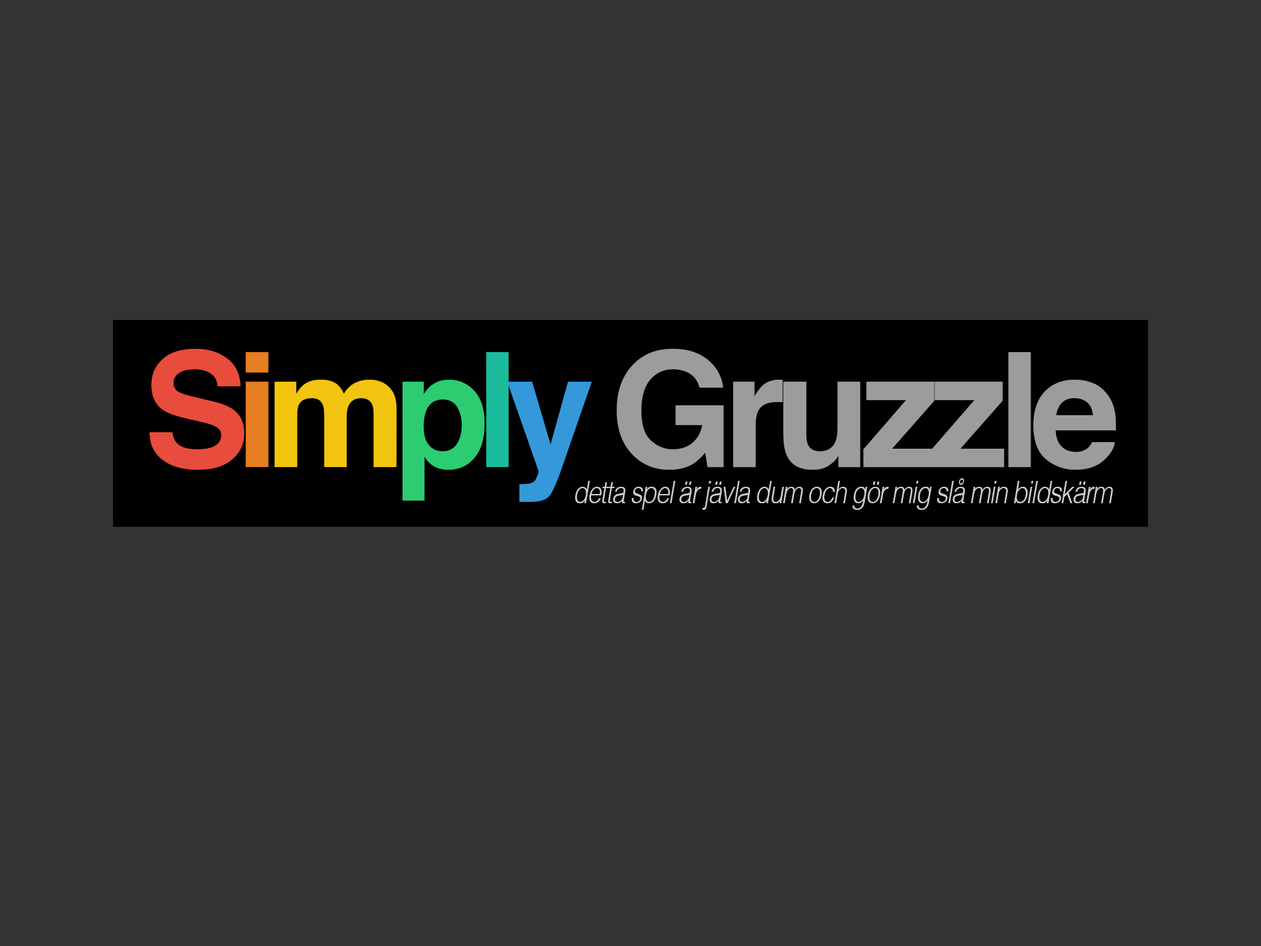
<style>
.page{position:relative;width:1261px;height:946px;background:#333333}
.page>*{position:absolute;margin:0}
.t1{font:159.6px "Helvetica-Bold";letter-spacing:-0.07em;color:#9c9c9c}
.t2{font:159.6px "Helvetica-Bold";letter-spacing:-0.09em;color:#e74c3c}
.t3{font:159.6px "Helvetica-Bold";letter-spacing:-0.09em;color:#e67e22}
.t4{font:159.6px "Helvetica-Bold";letter-spacing:-0.09em;color:#f1c40f}
.t5{font:159.6px "Helvetica-Bold";letter-spacing:-0.09em;color:#2ecc71}
.t6{font:159.6px "Helvetica-Bold";letter-spacing:-0.09em;color:#1abc9c}
.t7{font:159.6px "Helvetica-Bold";letter-spacing:-0.09em;color:#3498db}
.t8{font:31.5px "Helvetica-LightOblique";letter-spacing:-0.05em;color:#cfcfcf;scale:0.8 1}
</style>
<div class="page">
<p class="t1" style="left:149px;top:349px;width:967px;height:153px"><span class="t2">S</span><span class="t3">i</span><span class="t4">m</span><span class="t5">p</span><span class="t6">l</span><span class="t7">y </span>Gruzzle</p>
<p class="t8" style="left:575px;top:478px;width:538px;height:32px">detta spel är jävla dum och gör mig slå min bildskärm</p>
</div>
